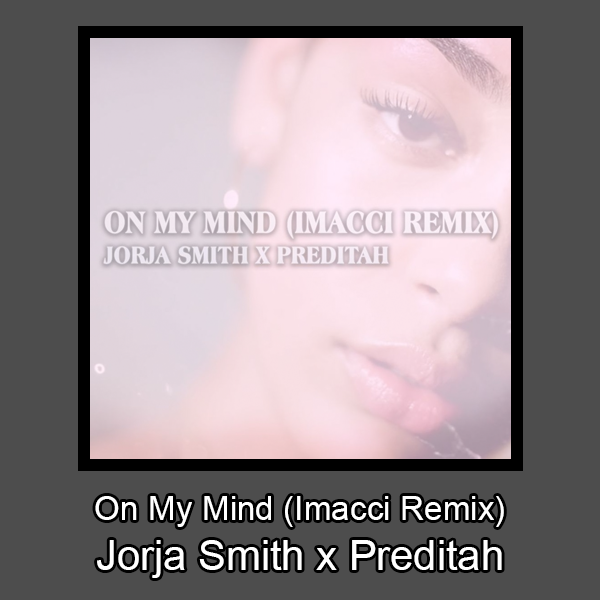
<style>
.page{position:relative;width:600px;height:600px;background:#4d4d4d}
.page>*{position:absolute;margin:0}
.t1{font:33.3px "ArialMT";color:#ffffff}
.t2{font:41.7px "ArialMT";color:#ffffff}
</style>
<div class="page">
<p class="t1" style="left:95px;top:496px;width:409px;height:82px;text-align:center">On My Mind (Imacci Remix)<br><span class="t2">Jorja Smith x Preditah</span></p>
</div>
